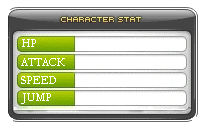
<style>
.page{position:relative;width:206px;height:130px;background:#ffffff}
.page>*{position:absolute;margin:0}
.t1{font:12px "CalifornianFB-Reg";color:#ffffff}
</style>
<div class="page">
<p class="t1" style="left:22px;top:39px;width:14px;height:8px">HP</p>
<p class="t1" style="left:21px;top:58px;width:44px;height:8px">ATTACK</p>
<p class="t1" style="left:21px;top:76px;width:35px;height:8px">SPEED</p>
<p class="t1" style="left:21px;top:93px;width:30px;height:11px">JUMP</p>
</div>
